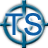
<style>
.page{position:relative;width:48px;height:48px;background:#ffffff}
.page>*{position:absolute;margin:0}
.t1{font:30px "ArialMT";color:#0c5da5}
</style>
<div class="page">
<p class="t1" style="left:5px;top:13px;width:37px;height:23px">TS</p>
</div>
